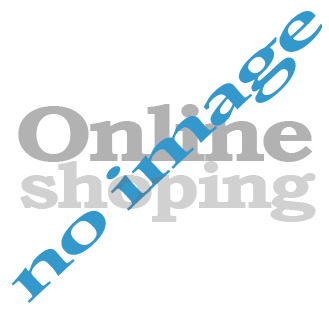
<style>
.page{position:relative;width:329px;height:320px;background:#ffffff}
.page>*{position:absolute;margin:0}
.t1{font:60.5px "BookAntiqua-Bold";letter-spacing:-0.06em;color:#3399cc;scale:1.81 1}
.t2{font:79.2px "BookmanOldStyle-Bold";letter-spacing:-0.06em;color:#b2b2b2;scale:1.21 1}
.t3{font:66px "BookmanOldStyle-Bold";letter-spacing:-0.06em;color:#d1d1d1;scale:1.21 1}
</style>
<div class="page">
<p class="t1" style="left:11px;top:11px;width:311px;height:292px;rotate:-43deg">no image</p>
<p class="t2" style="left:18px;top:104px;width:295px;height:58px">Online</p>
<p class="t3" style="left:20px;top:161px;width:296px;height:61px">shoping</p>
</div>
